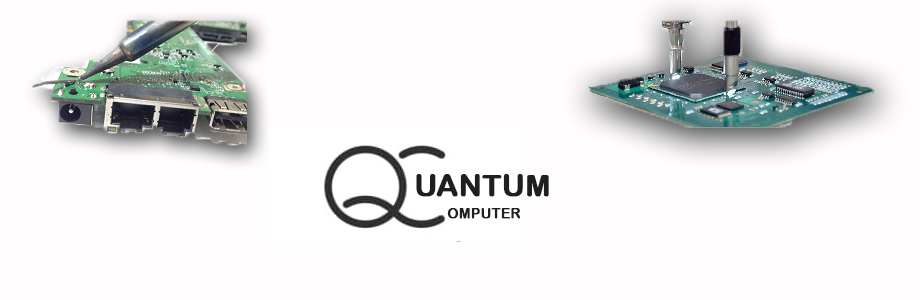
<style>
.page{position:relative;width:920px;height:300px;background:#fffdfd}
.page>*{position:absolute;margin:0}
.t1{font:14px "ArialRoundedMTBold";color:#201f1f;font-weight:bold}
.t2{font:30px "ArialRoundedMTBold";color:#201f1f;font-weight:bold}
</style>
<div class="page">
<p class="t1" style="left:416px;top:174px;width:133px;height:45px;text-align:center"><span class="t2">  UANTUM<br>    </span>OMPUTER</p>
</div>
